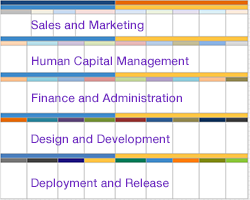
<style>
.page{position:relative;width:250px;height:200px;background:#ffffff}
.page>*{position:absolute;margin:0}
.t1{font:12px "HelveticaNeue-Medium";color:#7026c3}
</style>
<div class="page">
<p class="t1" style="left:31px;top:20px;width:113px;height:12px">Sales and Marketing</p>
<p class="t1" style="left:32px;top:56px;width:157px;height:12px">Human Capital Management</p>
<p class="t1" style="left:32px;top:93px;width:150px;height:10px">Finance and Administration</p>
<p class="t1" style="left:31px;top:134px;width:139px;height:12px">Design and Development</p>
<p class="t1" style="left:31px;top:178px;width:138px;height:12px">Deployment and Release</p>
</div>
